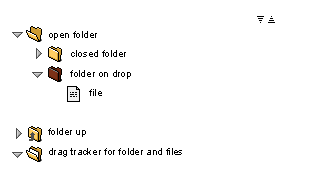
<style>
.page{position:relative;width:329px;height:196px;background:#ffffff}
.page>*{position:absolute;margin:0}
.t1{font:10px/19.5px "ArialMT";color:#000000}
</style>
<div class="page">
<p class="t1" style="left:48px;top:31px;width:134px;height:126px">open folder<br>        closed folder<br>        folder on drop<br>               file<br><br>folder up<br>drag tracker for folder and files</p>
</div>
